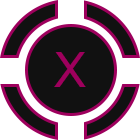
<style>
.page{position:relative;width:140px;height:140px;background:#111111}
.page>*{position:absolute;margin:0}
.t1{font:48px "ArialMT";color:#9e005d}
</style>
<div class="page">
<p class="t1" style="left:54px;top:52px;width:32px;height:35px">X</p>
</div>
